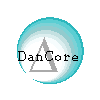
<style>
.page{position:relative;width:100px;height:100px;background:#ffffff}
.page>*{position:absolute;margin:0}
.t1{font:16.7px "PrestigeEliteStd-Bd";color:#000000}
.t2{font:13.9px "PrestigeEliteStd-Bd";color:#000000}
</style>
<div class="page">
<p class="t1" style="left:18px;top:51px;width:8px;height:10px">D</p>
<p class="t2" style="left:28px;top:51px;width:50px;height:10px">an<span class="t1">C</span>ore</p>
</div>
